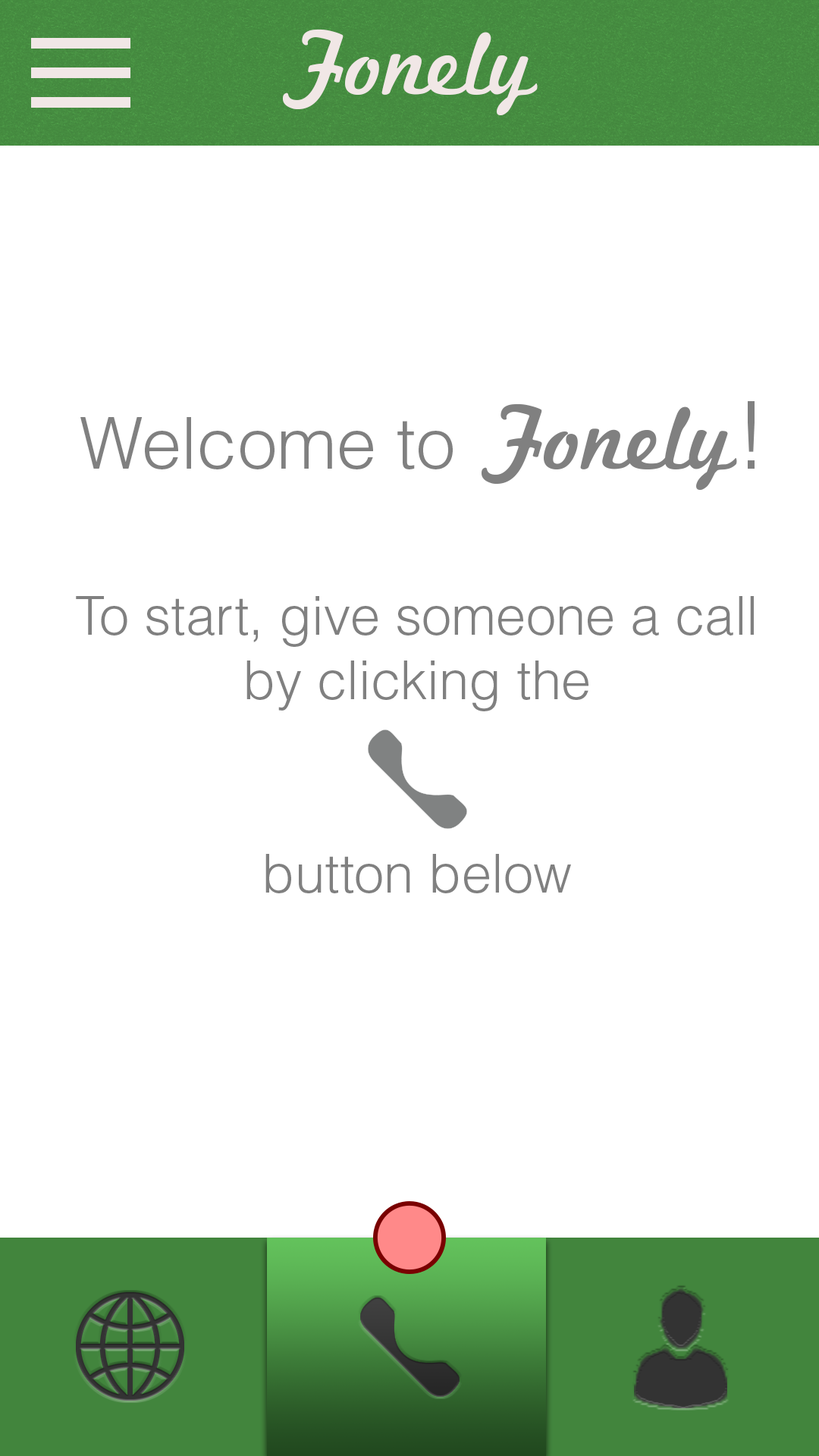
<style>
.page{position:relative;width:819px;height:1456px;background:#ffffff}
.page>*{position:absolute;margin:0}
.t1{font:93.8px "MarketingScript";color:#f1e7e6}
.t2{font:71.5px "HelveticaLTStd-Light";color:#808080}
.t3{font:93.8px "MarketingScript";color:#808080}
.t4{font:93.8px "HelveticaLTStd-Light";color:#808080}
.t5{font:53.6px "HelveticaLTStd-Light";color:#808080}
</style>
<div class="page">
<p class="t1" style="left:283px;top:29px;width:255px;height:86px">Fonely</p>
<p class="t2" style="left:80px;top:401px;width:675px;height:89px">Welcome to <span class="t3">Fonely</span><span class="t4">!</span></p>
<p class="t5" style="left:76px;top:596px;width:678px;height:297px;text-align:center">To start, give someone a call by clicking the<br> <br><br>button below</p>
</div>
